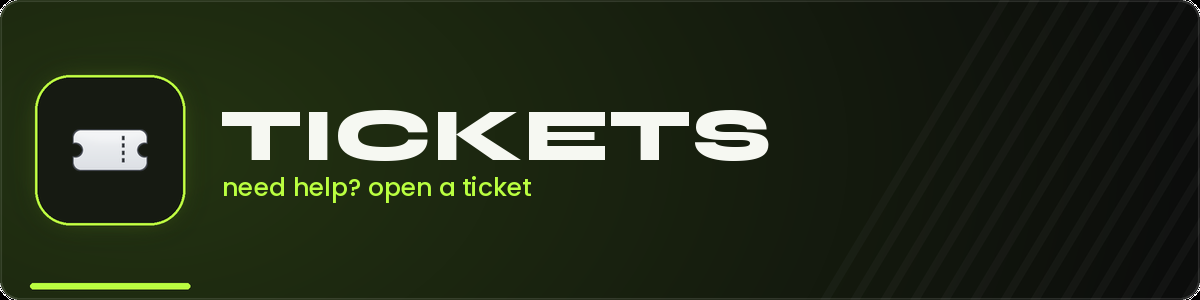
<style>
.page{position:relative;width:1200px;height:300px}
.page>*{position:absolute;margin:0}
.t1{font:75px "Syne-ExtraBold";color:#f6f8f2}
.t2{font:25px "Poppins-Medium";color:#baff40}
</style>
<div class="page">
<p class="t1" style="left:222px;top:110px;width:547px;height:51px">TICKETS</p>
<p class="t2" style="left:224px;top:176px;width:307px;height:27px">need help? open a ticket</p>
</div>
